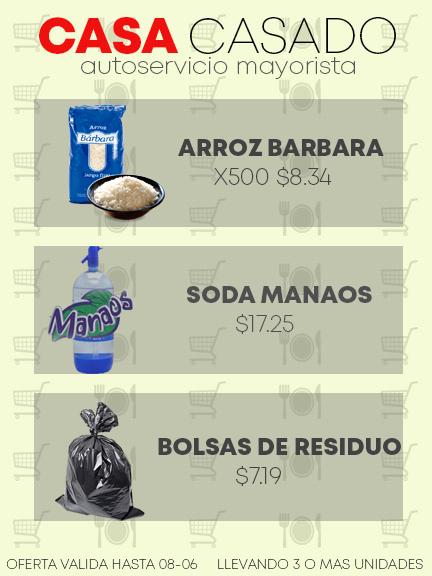
<style>
.page{position:relative;width:432px;height:576px;background:#c1c5ae}
.page>*{position:absolute;margin:0}
.t1{font:24px "Mont-HeavyDEMO";color:#424242}
.t2{font:24px "Mont-ExtraLightDEMO";color:#424242}
.t3{font:14px "Mont-ExtraLightDEMO";color:#424242}
</style>
<div class="page">
<p class="t1" style="left:178px;top:139px;width:206px;height:48px">ARROZ BARBARA <br><span class="t2"> X500 $8.34</span></p>
<p class="t1" style="left:187px;top:286px;width:185px;height:48px">SODA MANAOS<br><span class="t2">   $17.25</span></p>
<p class="t1" style="left:158px;top:438px;width:243px;height:48px">BOLSAS DE RESIDUO<br><span class="t2">   $7.19</span></p>
<p class="t3" style="left:6px;top:559px;width:192px;height:10px">OFERTA VALIDA HASTA 08-06</p>
<p class="t3" style="left:218px;top:559px;width:205px;height:10px">LLEVANDO 3 O MAS UNIDADES</p>
</div>
